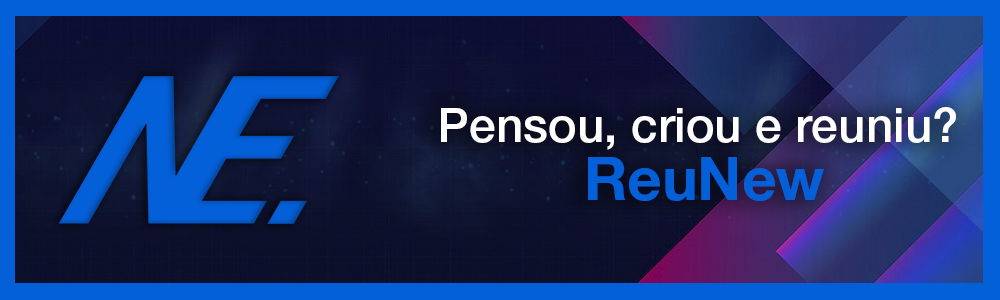
<style>
.page{position:relative;width:1000px;height:300px}
.page>*{position:absolute;margin:0}
.t1{font:48px/11.7px "HelveticaNeueLTStd-Md";color:#ffffff}
.t2{font:60px/11.7px "HelveticaNeueLTStd-Bd";color:#0460d9}
</style>
<div class="page">
<p class="t1" style="left:441px;top:107px;width:515px;height:94px;text-align:center">Pensou, criou e reuniu?<br><br><br><br><br> <span class="t2">ReuNew</span></p>
</div>
